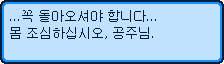
<style>
.page{position:relative;width:224px;height:64px;background:#c0e1ff}
.page>*{position:absolute;margin:0}
.t1{font:12.5px "Gulim";color:#001c37}
</style>
<div class="page">
<p class="t1" style="left:10px;top:10px;width:146px;height:12px">...꼭 돌아오셔야 합니다...</p>
<p class="t1" style="left:10px;top:27px;width:143px;height:12px">몸 조심하십시오, 공주님.</p>
</div>
